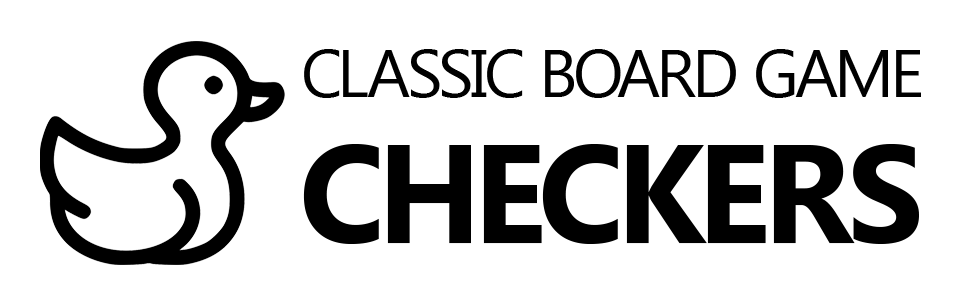
<style>
.page{position:relative;width:961px;height:293px;background:#ffffff}
.page>*{position:absolute;margin:0}
.t1{font:66.9px "SegoeUI";letter-spacing:-0.04em;color:#000000}
.t2{font:141px "SegoeUI-Bold";letter-spacing:-0.04em;color:#000000}
</style>
<div class="page">
<p class="t1" style="left:304px;top:49px;width:617px;height:49px">CLASSIC BOARD GAME</p>
<p class="t2" style="left:303px;top:144px;width:616px;height:100px">CHECKERS</p>
</div>
